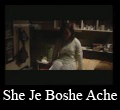
<style>
.page{position:relative;width:120px;height:110px;background:#000000}
.page>*{position:absolute;margin:0}
.t1{font:15px "TimesNewRomanPSMT";color:#ffffff}
</style>
<div class="page">
<p class="t1" style="left:3px;top:89px;width:115px;height:11px">She Je Boshe Ache</p>
</div>
